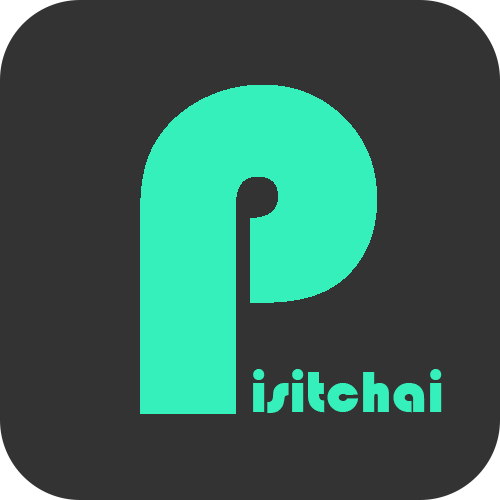
<style>
.page{position:relative;width:500px;height:500px;background:#333333}
.page>*{position:absolute;margin:0}
.t1{font:480px "Bauhaus93";color:#35f0bb}
.t2{font:60px "Bauhaus93";color:#35f0bb}
</style>
<div class="page">
<p class="t1" style="left:140px;top:85px;width:237px;height:329px">P</p>
<p class="t2" style="left:253px;top:369px;width:189px;height:44px">isitchai</p>
</div>
